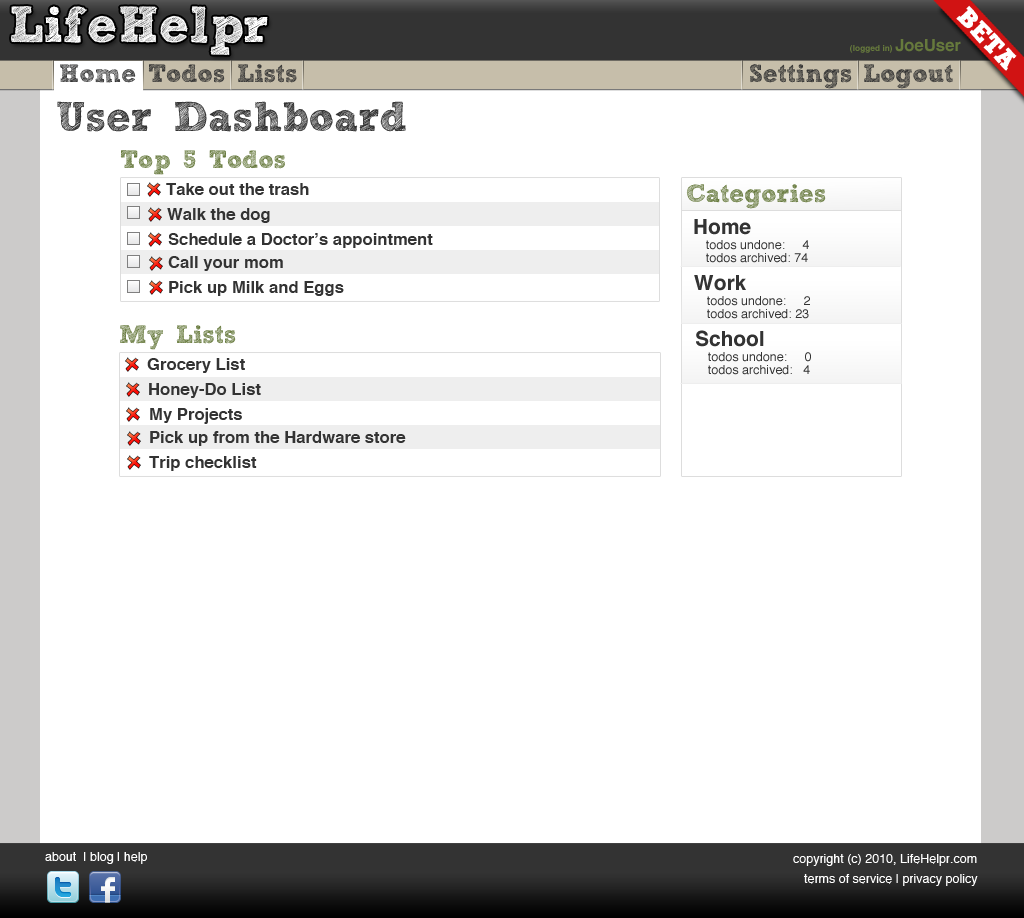
<style>
.page{position:relative;width:1024px;height:918px;background:#ffffff}
.page>*{position:absolute;margin:0}
.t1{font:8.3px "Helvetica-Bold";color:#66793c}
.t2{font:16.7px "Helvetica-Bold";color:#66793c}
.t3{font:25px "freeversionSketchBlock-Bold";color:#333333}
.t4{font:41.7px "freeversionSketchBlock-Bold";color:#333333}
.t5{font:25px "freeversionSketchBlock-Bold";color:#66793c}
.t6{font:16.7px "Helvetica-Bold";color:#333333}
.t7{font:20.8px "Helvetica-Bold";color:#333333}
.t8{font:12.5px "Helvetica";color:#333333}
.t9{font:12.5px "Helvetica";color:#ffffff}
</style>
<div class="page">
<p class="t1" style="left:850px;top:39px;width:111px;height:14px">(logged in) <span class="t2">JoeUser</span></p>
<p class="t3" style="left:60px;top:64px;width:76px;height:19px">Home</p>
<p class="t3" style="left:148px;top:64px;width:77px;height:19px">Todos</p>
<p class="t3" style="left:238px;top:64px;width:59px;height:19px">Lists</p>
<p class="t3" style="left:750px;top:64px;width:102px;height:25px">Settings</p>
<p class="t3" style="left:864px;top:64px;width:89px;height:25px">Logout</p>
<p class="t4" style="left:57px;top:101px;width:349px;height:31px">User Dashboard</p>
<p class="t5" style="left:120px;top:150px;width:165px;height:25px">Top 5 Todos</p>
<p class="t6" style="left:166px;top:183px;width:143px;height:12px">Take out the trash</p>
<p class="t5" style="left:686px;top:184px;width:140px;height:25px">Categories</p>
<p class="t6" style="left:167px;top:208px;width:103px;height:15px">Walk the dog</p>
<p class="t7" style="left:694px;top:219px;width:57px;height:16px">Home</p>
<p class="t6" style="left:168px;top:233px;width:265px;height:15px">Schedule a Doctor’s appointment</p>
<p class="t8" style="left:706px;top:240px;width:103px;height:10px">todos undone:     4</p>
<p class="t6" style="left:168px;top:256px;width:115px;height:15px">Call your mom</p>
<p class="t8" style="left:706px;top:253px;width:102px;height:10px">todos archived: 74</p>
<p class="t6" style="left:169px;top:281px;width:175px;height:15px">Pick up Milk and Eggs</p>
<p class="t7" style="left:694px;top:275px;width:52px;height:16px">Work</p>
<p class="t8" style="left:707px;top:296px;width:103px;height:10px">todos undone:     2</p>
<p class="t8" style="left:707px;top:309px;width:102px;height:10px">todos archived: 23</p>
<p class="t5" style="left:120px;top:325px;width:116px;height:25px">My Lists</p>
<p class="t7" style="left:696px;top:330px;width:68px;height:17px">School</p>
<p class="t8" style="left:708px;top:352px;width:103px;height:10px">todos undone:     0</p>
<p class="t6" style="left:147px;top:358px;width:98px;height:15px">Grocery List</p>
<p class="t8" style="left:708px;top:365px;width:102px;height:10px">todos archived:   4</p>
<p class="t6" style="left:149px;top:383px;width:112px;height:15px">Honey-Do List</p>
<p class="t6" style="left:150px;top:408px;width:92px;height:16px">My Projects</p>
<p class="t6" style="left:150px;top:431px;width:256px;height:15px">Pick up from the Hardware store</p>
<p class="t6" style="left:149px;top:456px;width:108px;height:15px">Trip checklist</p>
<p class="t9" style="left:45px;top:852px;width:102px;height:12px">about  | blog | help</p>
<p class="t9" style="left:793px;top:854px;width:184px;height:12px">copyright (c) 2010, LifeHelpr.com</p>
<p class="t9" style="left:804px;top:874px;width:174px;height:12px">terms of service | privacy policy</p>
</div>
